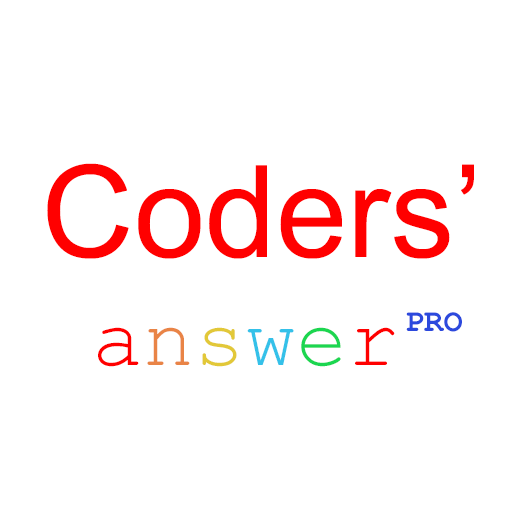
<style>
.page{position:relative;width:512px;height:512px;background:#ffffff}
.page>*{position:absolute;margin:0}
.t1{font:128px "ArialMT";color:#ff0000}
.t2{font:32px "CourierNewPS-BoldMT";color:#2c49dd}
.t3{font:85.3px "CourierNewPSMT";color:#ff0000}
.t4{font:85.3px "CourierNewPSMT";color:#e98446}
.t5{font:85.3px "CourierNewPSMT";color:#e2c838}
.t6{font:85.3px "CourierNewPSMT";color:#34c1e9}
.t7{font:85.3px "CourierNewPSMT";color:#1bd650}
</style>
<div class="page">
<p class="t1" style="left:47px;top:163px;width:427px;height:96px">Coders’</p>
<p class="t2" style="left:406px;top:312px;width:56px;height:20px">PRO</p>
<p class="t3" style="left:98px;top:327px;width:297px;height:40px">a<span class="t4">n</span><span class="t5">s</span><span class="t6">w</span><span class="t7">e</span>r</p>
</div>
